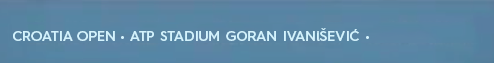
<style>
.page{position:relative;width:494px;height:63px}
.page>*{position:absolute;margin:0}
.t1{font:14px "HurmeGeometricSans4-SemiBold";color:#d3f3fd}
</style>
<div class="page">
<p class="t1" style="left:121px;top:28px;width:248px;height:13px">• ATP STADIUM GORAN IVANiŠEVIĆ •</p>
<p class="t1" style="left:13px;top:31px;width:102px;height:10px">CROATIA OPEN</p>
</div>
